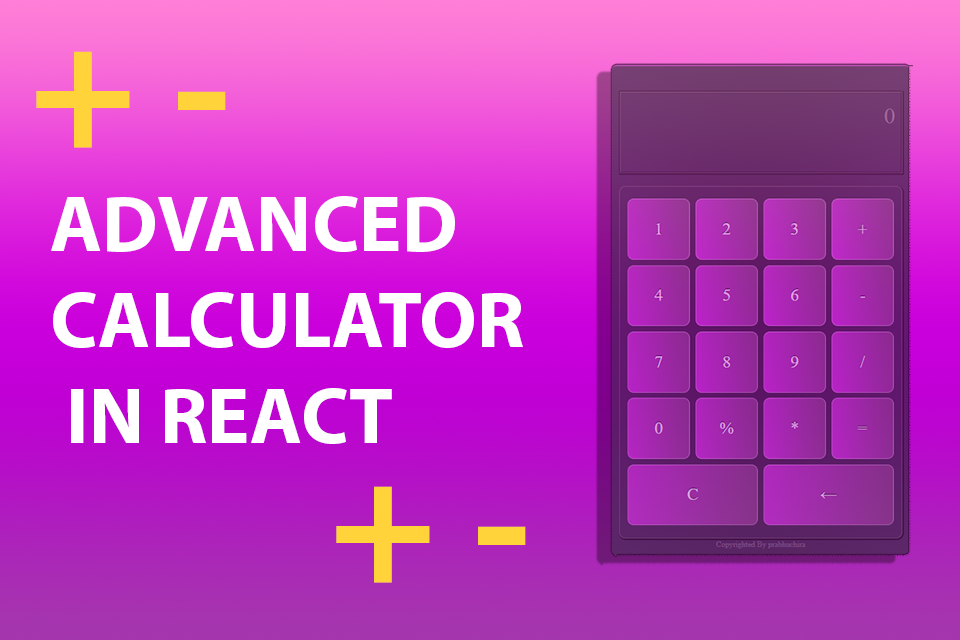
<style>
.page{position:relative;width:960px;height:640px}
.page>*{position:absolute;margin:0}
.t1{font:180px "MyriadPro-Bold";color:#ffd339}
.t2{font:80px "MyriadPro-Bold";color:#ffffff}
</style>
<div class="page">
<p class="t1" style="left:36px;top:51px;width:190px;height:97px">+ -</p>
<p class="t2" style="left:51px;top:196px;width:472px;height:248px">ADVANCED <br>CALCULATOR<br> IN REACT</p>
<p class="t1" style="left:336px;top:486px;width:190px;height:97px">+ -</p>
</div>
